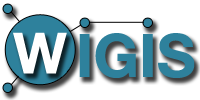
<style>
.page{position:relative;width:200px;height:100px;background:#ffffff}
.page>*{position:absolute;margin:0}
.t1{font:57px "HelveticaNeue-Bold";color:#ffffff}
.t2{font:60px "HelveticaNeue-Bold";color:#2e819c}
</style>
<div class="page">
<p class="t1" style="left:13px;top:32px;width:54px;height:42px">W</p>
<p class="t2" style="left:79px;top:33px;width:116px;height:45px">IGIS</p>
</div>
